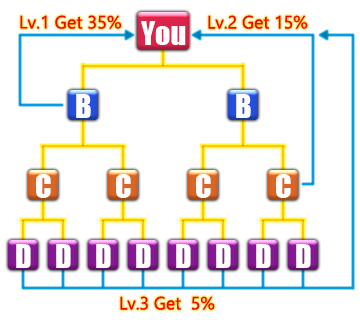
<style>
.page{position:relative;width:360px;height:320px;background:#ffffff}
.page>*{position:absolute;margin:0}
.t1{font:18px "SegoeUI";color:#ff0000}
.t2{font:30px "Impact";color:#fefefe}
</style>
<div class="page">
<p class="t1" style="left:20px;top:15px;width:101px;height:14px">Lv.1 Get 35%</p>
<p class="t1" style="left:208px;top:15px;width:100px;height:14px">Lv.2 Get 15%</p>
<p class="t2" style="left:141px;top:21px;width:45px;height:24px">You</p>
<p class="t2" style="left:76px;top:94px;width:15px;height:24px">B</p>
<p class="t2" style="left:236px;top:94px;width:15px;height:24px">B</p>
<p class="t2" style="left:36px;top:174px;width:15px;height:24px">C</p>
<p class="t2" style="left:116px;top:174px;width:15px;height:24px">C</p>
<p class="t2" style="left:196px;top:174px;width:15px;height:24px">C</p>
<p class="t2" style="left:276px;top:174px;width:15px;height:24px">C</p>
<p class="t2" style="left:16px;top:244px;width:15px;height:24px">D</p>
<p class="t2" style="left:56px;top:244px;width:15px;height:24px">D</p>
<p class="t2" style="left:96px;top:244px;width:15px;height:24px">D</p>
<p class="t2" style="left:136px;top:244px;width:15px;height:24px">D</p>
<p class="t2" style="left:176px;top:244px;width:15px;height:24px">D</p>
<p class="t2" style="left:216px;top:244px;width:15px;height:24px">D</p>
<p class="t2" style="left:256px;top:244px;width:15px;height:24px">D</p>
<p class="t2" style="left:296px;top:244px;width:15px;height:24px">D</p>
<p class="t1" style="left:120px;top:296px;width:95px;height:14px">Lv.3 Get  5%</p>
</div>
